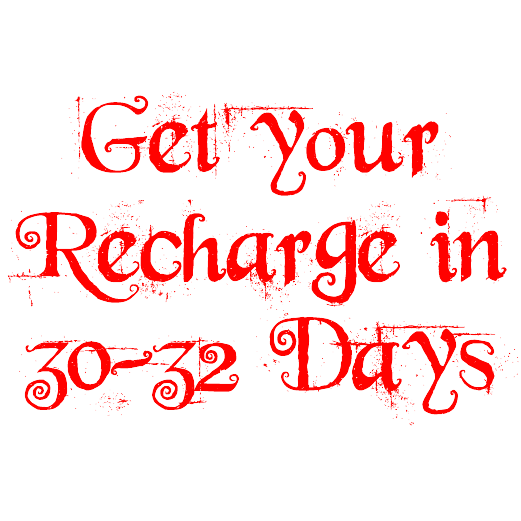
<style>
.page{position:relative;width:521px;height:521px;background:#ffffff}
.page>*{position:absolute;margin:0}
.t1{font:109.3px/109.3px "BeyondWonderland";color:#ff0200}
</style>
<div class="page">
<p class="t1" style="left:7px;top:91px;width:512px;height:335px;text-align:center">Get your <br>Recharge in 30-32 Days</p>
</div>
